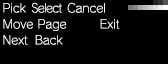
<style>
.page{position:relative;width:168px;height:64px;background:#000000}
.page>*{position:absolute;margin:0}
.t1{font:12px/16px "RodinNTLGPro-L";color:#ffffff}
.t2{font:12px/16px "RodinNTLGPro-L";letter-spacing:-0.05em;color:#ffffff;scale:0.9 1}
.t3{font:12px/16px "RodinNTLGPro-L";letter-spacing:-0.05em;color:#ffffff}
</style>
<div class="page">
<p class="t1" style="left:3px;top:2px;width:117px;height:43px">Pick  <span class="t2">S</span><span class="t3">elect  </span>Cancel<br>Move Page        Exit<br>Next  Back</p>
</div>
